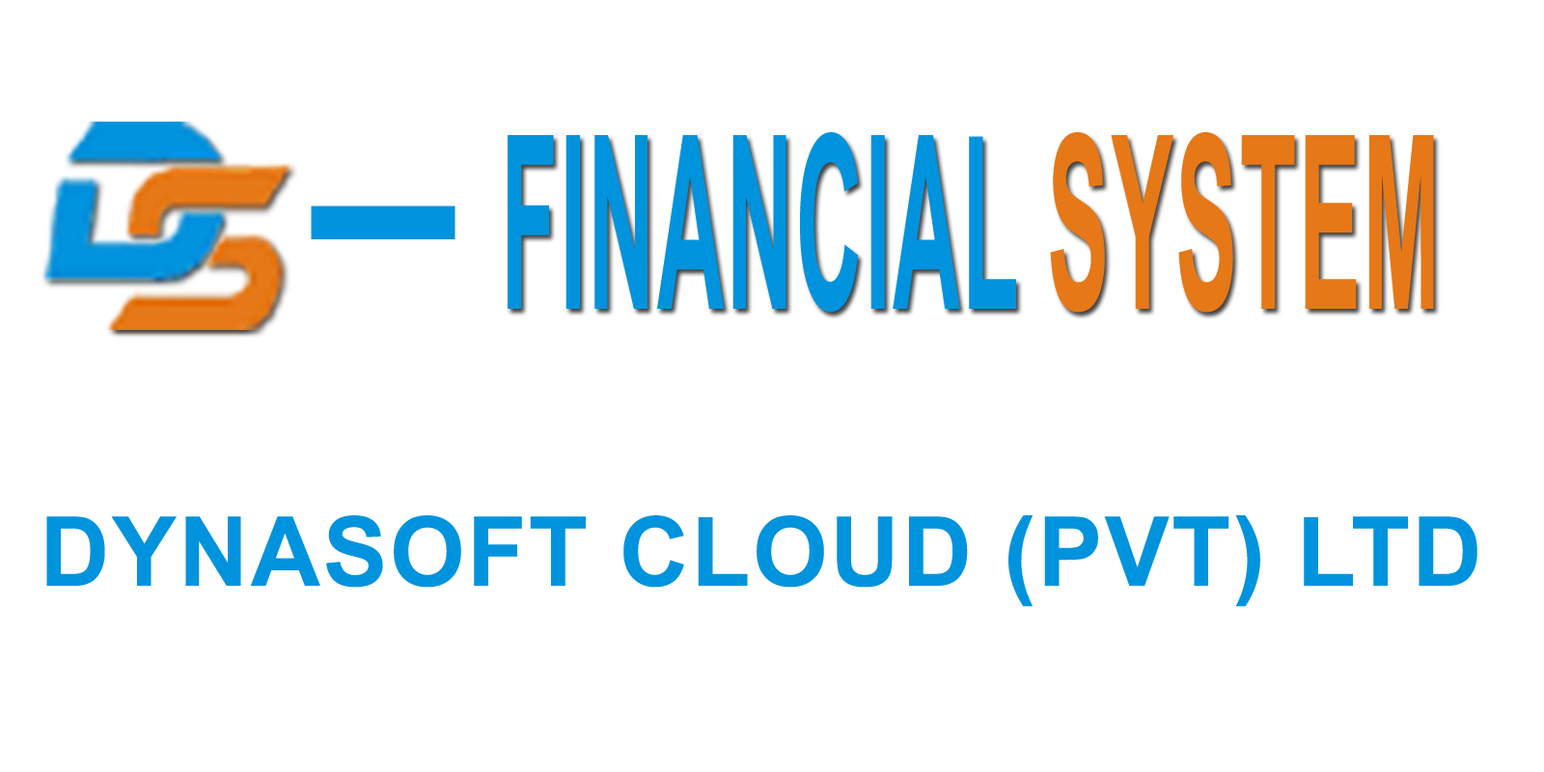
<style>
.page{position:relative;width:1544px;height:772px;background:#ffffff}
.page>*{position:absolute;margin:0}
.t1{font:242.3px "Arial-BoldMT";letter-spacing:0.025em;color:#0093dd;scale:0.38 1}
.t2{font:242.3px "Arial-BoldMT";letter-spacing:0.025em;color:#e67817;scale:0.38 1}
.t3{font:242.3px "Arial-BoldMT";letter-spacing:0.025em;color:#0093dd;scale:2.2 1}
.t4{font:96.5px "Arial-BoldMT";letter-spacing:0.025em;color:#0093dd}
</style>
<div class="page">
<p class="t1" style="left:508px;top:132px;width:926px;height:181px">FINANCIAL <span class="t2">SYSTEM</span></p>
<p class="t3" style="left:311px;top:206px;width:145px;height:33px">-</p>
<p class="t4" style="left:46px;top:515px;width:1432px;height:92px">DYNASOFT CLOUD (PVT) LTD</p>
</div>
